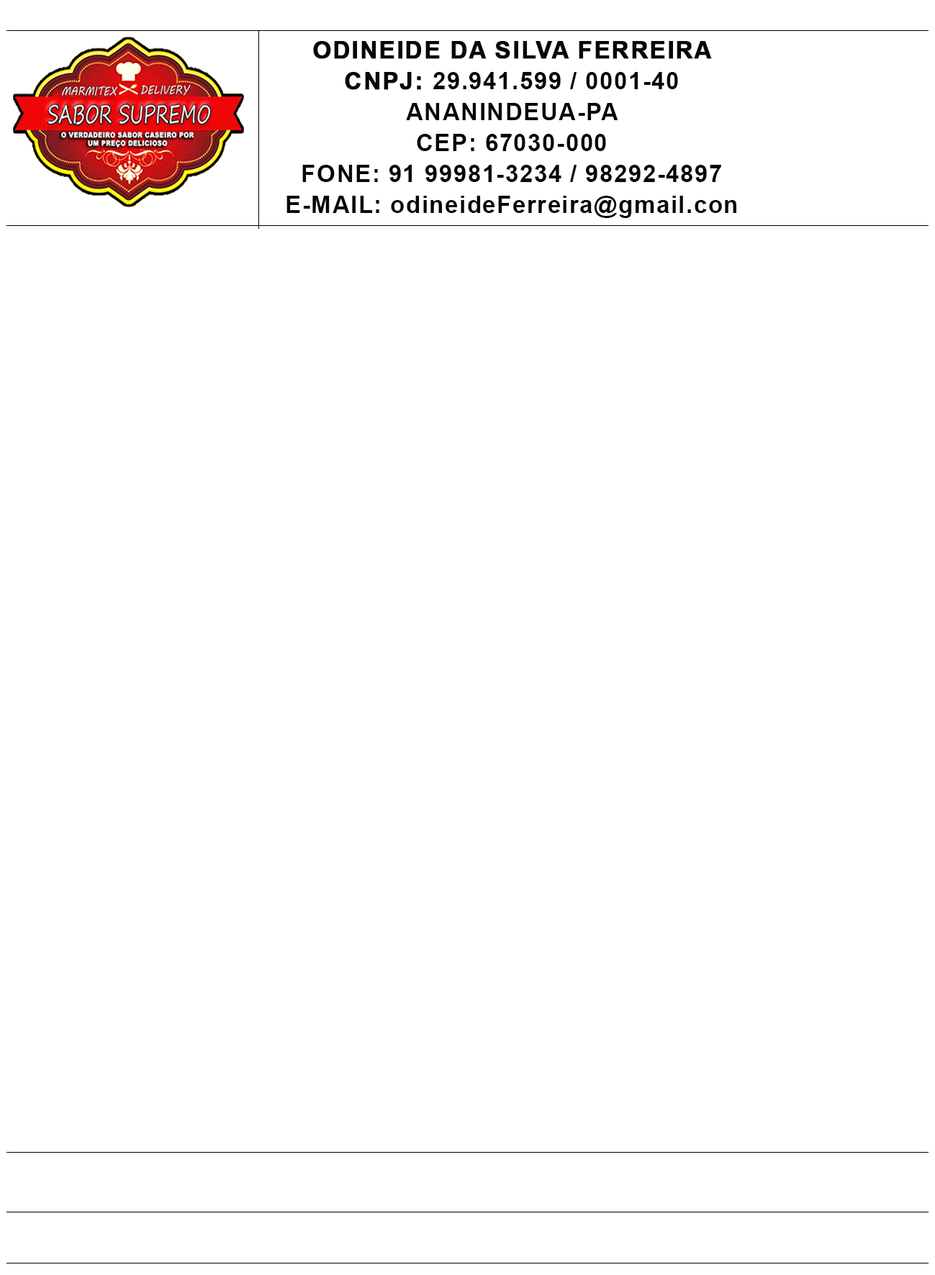
<style>
.page{position:relative;width:935px;height:1275px;background:#ffffff}
.page>*{position:absolute;margin:0}
.t1{font:24px/31px "Arial-BoldMT";letter-spacing:0.04em;color:#060606}
.t2{font:24px/31px "Arial-BoldMT";letter-spacing:0.04em;color:#060606;font-weight:bold}
</style>
<div class="page">
<p class="t1" style="left:286px;top:41px;width:450px;height:177px;text-align:center"><span class="t2">ODINEIDE DA SILVA FERREIRA<br>CNPJ: </span>29.941.599 / 0001-40<br>ANANINDEUA-PA<br>CEP: 67030-000<br>FONE: 91 99981-3234 / 98292-4897<br>E-MAIL: odineideFerreira@gmail.con</p>
</div>
